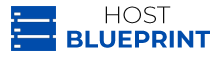
<style>
.page{position:relative;width:220px;height:78px;background:#ffffff}
.page>*{position:absolute;margin:0}
.t1{font:24px "Montserrat-Light";color:#0d0d0d}
.t2{font:24px "Montserrat-Bold";color:#004cab}
</style>
<div class="page">
<p class="t1" style="left:105px;top:6px;width:66px;height:18px">HOST</p>
<p class="t2" style="left:67px;top:30px;width:143px;height:18px">BLUEPRINT</p>
</div>
